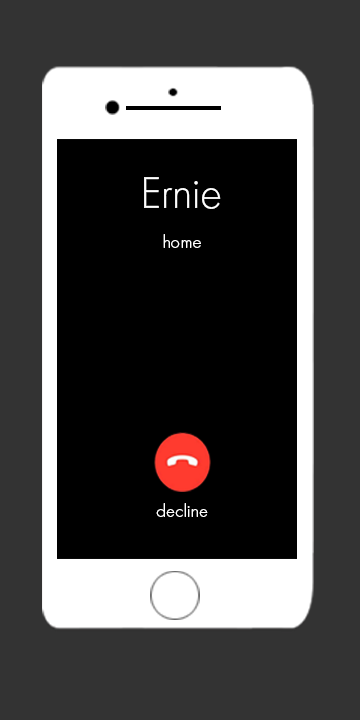
<style>
.page{position:relative;width:360px;height:720px;background:#333333}
.page>*{position:absolute;margin:0}
.t1{font:46px "FuturaPT-Light";letter-spacing:-0.01em;color:#ffffff}
.t2{font:18.6px "FuturaPT-Light";letter-spacing:0.01em;color:#ffffff}
</style>
<div class="page">
<p class="t1" style="left:144px;top:177px;width:77px;height:32px">Ernie</p>
<p class="t2" style="left:163px;top:234px;width:38px;height:14px">home</p>
<p class="t2" style="left:156px;top:503px;width:52px;height:14px">decline</p>
</div>
